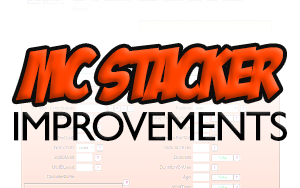
<style>
.page{position:relative;width:300px;height:188px;background:#ffffff}
.page>*{position:absolute;margin:0}
.t1{font:70.8px "BadaBoomBB";letter-spacing:-0.04em}
.t2{font:41.7px "GillSansMT";letter-spacing:-0.04em;color:#000000}
</style>
<div class="page">
<p class="t1" style="left:15px;top:46px;width:268px;height:58px">MC STACKER</p>
<p class="t2" style="left:14px;top:111px;width:273px;height:30px">IMPROVEMENTS</p>
</div>
